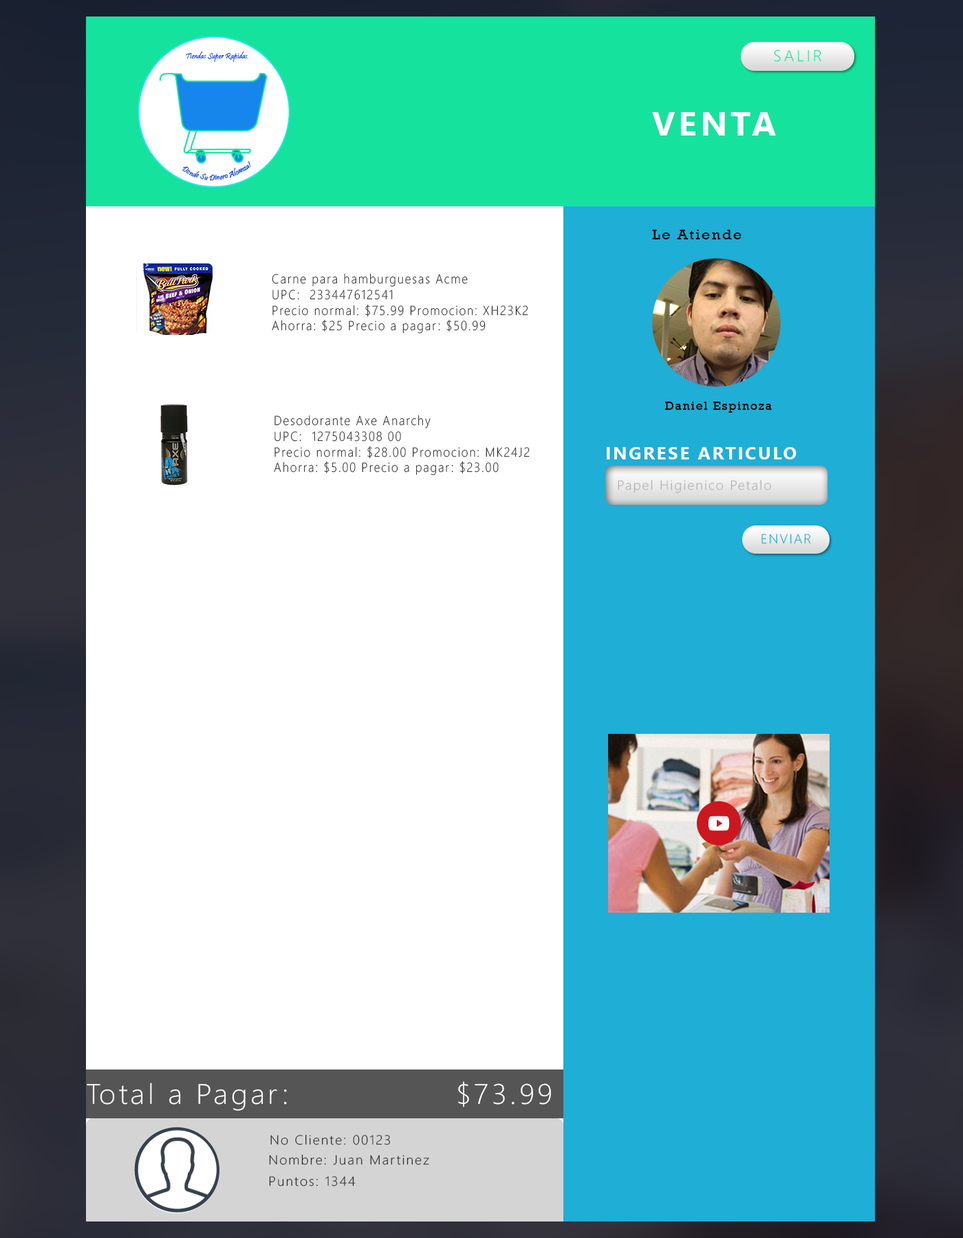
<style>
.page{position:relative;width:963px;height:1238px;background:#ffffff}
.page>*{position:absolute;margin:0}
.t1{font:15.7px "SegoeUI-Light";letter-spacing:0.14em;color:#15e29d;scale:1.06 1}
.t2{font:33px "SegoeUI-Bold";letter-spacing:0.1em;color:#ffffff;scale:1.04 1}
.t3{font:14.6px "Rockwell";letter-spacing:0.1em;color:#000000;scale:1.04 1}
.t4{font:13.1px "SegoeUI-Light";letter-spacing:0.1em;color:#2c2c2c;scale:0.91 1}
.t5{font:11.7px "Rockwell";letter-spacing:0.1em;color:#000001;scale:1.04 1}
.t6{font:17.2px "SegoeUI-Bold";letter-spacing:0.1em;color:#ffffff;scale:1.04 1}
.t7{font:13.1px "SegoeUI-Light";letter-spacing:0.1em;color:#b3b3b3;scale:1.04 1}
.t8{font:13.1px "SegoeUI-Light";letter-spacing:0.1em;color:#1faed5;scale:1.04 1}
.t9{font:28.2px "SegoeUI-Light";letter-spacing:0.1em;color:#ffffff;scale:1.04 1}
.t10{font:13.1px "SegoeUI-Light";letter-spacing:0.1em;color:#2c2c2c;scale:1.04 1}
</style>
<div class="page">
<p class="t1" style="left:774px;top:50px;width:47px;height:12px">SALIR</p>
<p class="t2" style="left:652px;top:112px;width:124px;height:24px">VENTA</p>
<p class="t3" style="left:652px;top:230px;width:90px;height:9px">Le Atiende</p>
<p class="t4" style="left:272px;top:273px;width:256px;height:61px">Carne para hamburguesas Acme<br>UPC:  233447612541  <br>Precio normal: $75.99 Promocion: XH23K2  <br>Ahorra: $25 Precio a pagar: $50.99</p>
<p class="t5" style="left:664px;top:402px;width:108px;height:11px">Daniel Espinoza</p>
<p class="t4" style="left:274px;top:415px;width:256px;height:60px">Desodorante Axe Anarchy<br>UPC:  1275043308 00 <br>Precio normal: $28.00 Promocion: MK24J2  <br>Ahorra: $5.00 Precio a pagar: $23.00</p>
<p class="t6" style="left:607px;top:447px;width:190px;height:13px">INGRESE ARTICULO</p>
<p class="t7" style="left:618px;top:479px;width:153px;height:14px">Papel Higienico Petalo</p>
<p class="t8" style="left:761px;top:534px;width:50px;height:10px">ENVIAR</p>
<p class="t9" style="left:87px;top:1081px;width:464px;height:30px">Total a Pagar:               $73.99</p>
<p class="t10" style="left:270px;top:1134px;width:120px;height:11px">No Cliente: 00123</p>
<p class="t10" style="left:269px;top:1154px;width:160px;height:11px">Nombre: Juan Martinez</p>
<p class="t10" style="left:269px;top:1176px;width:87px;height:11px">Puntos: 1344</p>
</div>
